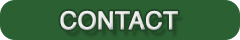
<style>
.page{position:relative;width:240px;height:40px;background:#2b6032}
.page>*{position:absolute;margin:0}
.t1{font:24px "Helvetica";color:#eeeeee;font-weight:bold}
</style>
<div class="page">
<p class="t1" style="left:60px;top:10px;width:118px;height:20px">CONTACT</p>
</div>
